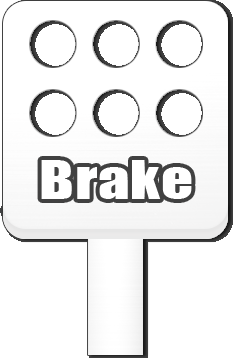
<style>
.page{position:relative;width:233px;height:358px;background:#ffffff}
.page>*{position:absolute;margin:0}
.t1{font:48.5px "Impact";letter-spacing:0.012em;color:#ffffff;scale:1.3 1}
</style>
<div class="page">
<p class="t1" style="left:41px;top:160px;width:151px;height:39px">Brake</p>
</div>
